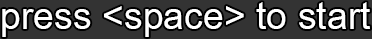
<style>
.page{position:relative;width:372px;height:39px;background:#333333}
.page>*{position:absolute;margin:0}
.t1{font:52.7px "Utsaah";color:#ffffff}
</style>
<div class="page">
<p class="t1" style="left:2px;top:2px;width:368px;height:35px">press &lt;space&gt; to start</p>
</div>
